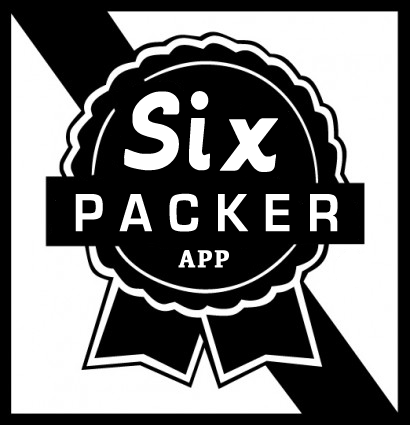
<style>
.page{position:relative;width:410px;height:425px;background:#000000}
.page>*{position:absolute;margin:0}
.t1{font:78.1px "MachineScript";letter-spacing:0.12em;color:#ffffff;font-weight:bold;scale:0.91 1}
.t2{font:55px "EurostileBold";letter-spacing:0.3em;color:#ffffff;font-weight:bold;scale:0.91 1}
.t3{font:25.3px "Kefa-Bold";letter-spacing:0.06em;color:#ffffff;font-weight:bold;scale:0.91 1}
</style>
<div class="page">
<p class="t1" style="left:124px;top:91px;width:154px;height:81px">Six</p>
<p class="t2" style="left:75px;top:193px;width:263px;height:39px">PACKER</p>
<p class="t3" style="left:178px;top:250px;width:51px;height:18px">APP</p>
</div>
